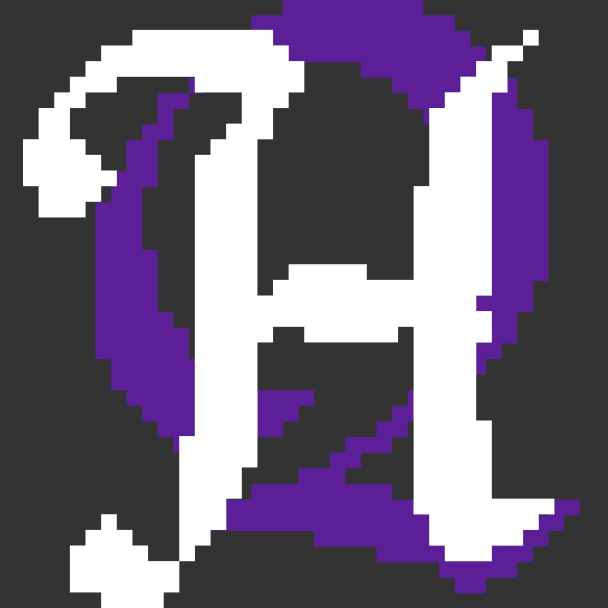
<style>
.page{position:relative;width:608px;height:608px;background:#333333}
.page>*{position:absolute;margin:0}
.t1{font:1000px "RuneScape-Quill-Caps";letter-spacing:0.01em;color:#ffffff}
</style>
<div class="page">
<p class="t1" style="left:23px;top:29px;width:532px;height:579px">H</p>
</div>
